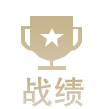
<style>
.page{position:relative;width:103px;height:109px;background:#ffffff}
.page>*{position:absolute;margin:0}
.t1{font:32px "AdobeHeitiStd-Regular";color:#cebfa0}
</style>
<div class="page">
<p class="t1" style="left:23px;top:76px;width:61px;height:31px">战绩</p>
</div>
